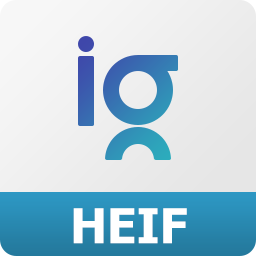
<style>
.page{position:relative;width:256px;height:256px}
.page>*{position:absolute;margin:0}
.t1{font:48px "Tahoma-Bold";color:#ffffff}
</style>
<div class="page">
<p class="t1" style="left:73px;top:208px;width:114px;height:36px">HEIF</p>
</div>
